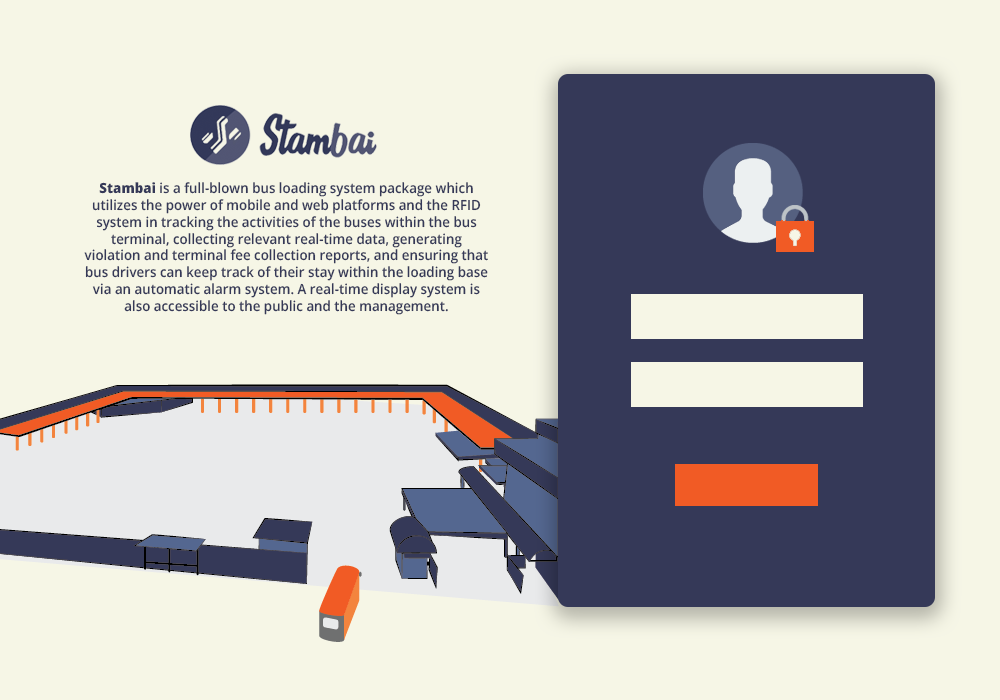
<style>
.page{position:relative;width:1000px;height:700px;background:#f6f6e6}
.page>*{position:absolute;margin:0}
.t1{font:14px "OpenSans-Semibold";color:#353958;scale:0.95 1}
.t2{font:14px "OpenSans-Extrabold";color:#353958;scale:0.95 1}
</style>
<div class="page">
<p class="t1" style="left:84px;top:182px;width:404px;height:133px;text-align:center"><span class="t2">Stambai </span>is a full-blown bus loading system package which utilizes the power of mobile and web platforms and the RFID system in tracking the activities of the buses within the bus terminal, collecting relevant real-time data, generating violation and terminal fee collection reports, and ensuring that bus drivers can keep track of their stay within the loading base via an automatic alarm system. A real-time display system is also accessible to the public and the management.</p>
</div>
